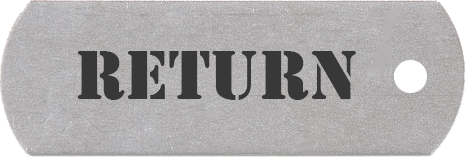
<style>
.page{position:relative;width:466px;height:157px}
.page>*{position:absolute;margin:0}
.t1{font:72px "Stencil";color:#383838}
</style>
<div class="page">
<p class="t1" style="left:77px;top:51px;width:279px;height:49px">Return</p>
</div>
